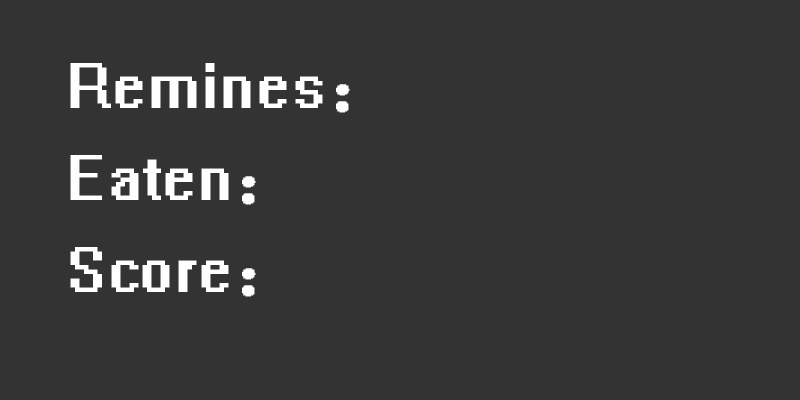
<style>
.page{position:relative;width:800px;height:400px;background:#333333}
.page>*{position:absolute;margin:0}
.t1{font:72px "System";color:#fefefe}
</style>
<div class="page">
<p class="t1" style="left:70px;top:63px;width:280px;height:50px">Remines：</p>
<p class="t1" style="left:70px;top:155px;width:186px;height:50px">Eaten：</p>
<p class="t1" style="left:70px;top:247px;width:186px;height:50px">Score：</p>
</div>
